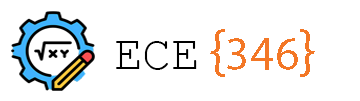
<style>
.page{position:relative;width:360px;height:101px;background:#ffffff}
.page>*{position:absolute;margin:0}
.t1{font:48px "MyriadPro-Regular";color:#f37726}
.t2{font:60px "MyriadPro-Regular";color:#f37726}
.t3{font:48px "CourierNewPSMT";color:#000000}
</style>
<div class="page">
<p class="t1" style="left:210px;top:29px;width:105px;height:48px"><span class="t2">{</span>346<span class="t2">}</span></p>
<p class="t3" style="left:116px;top:41px;width:81px;height:29px">ECE</p>
</div>
